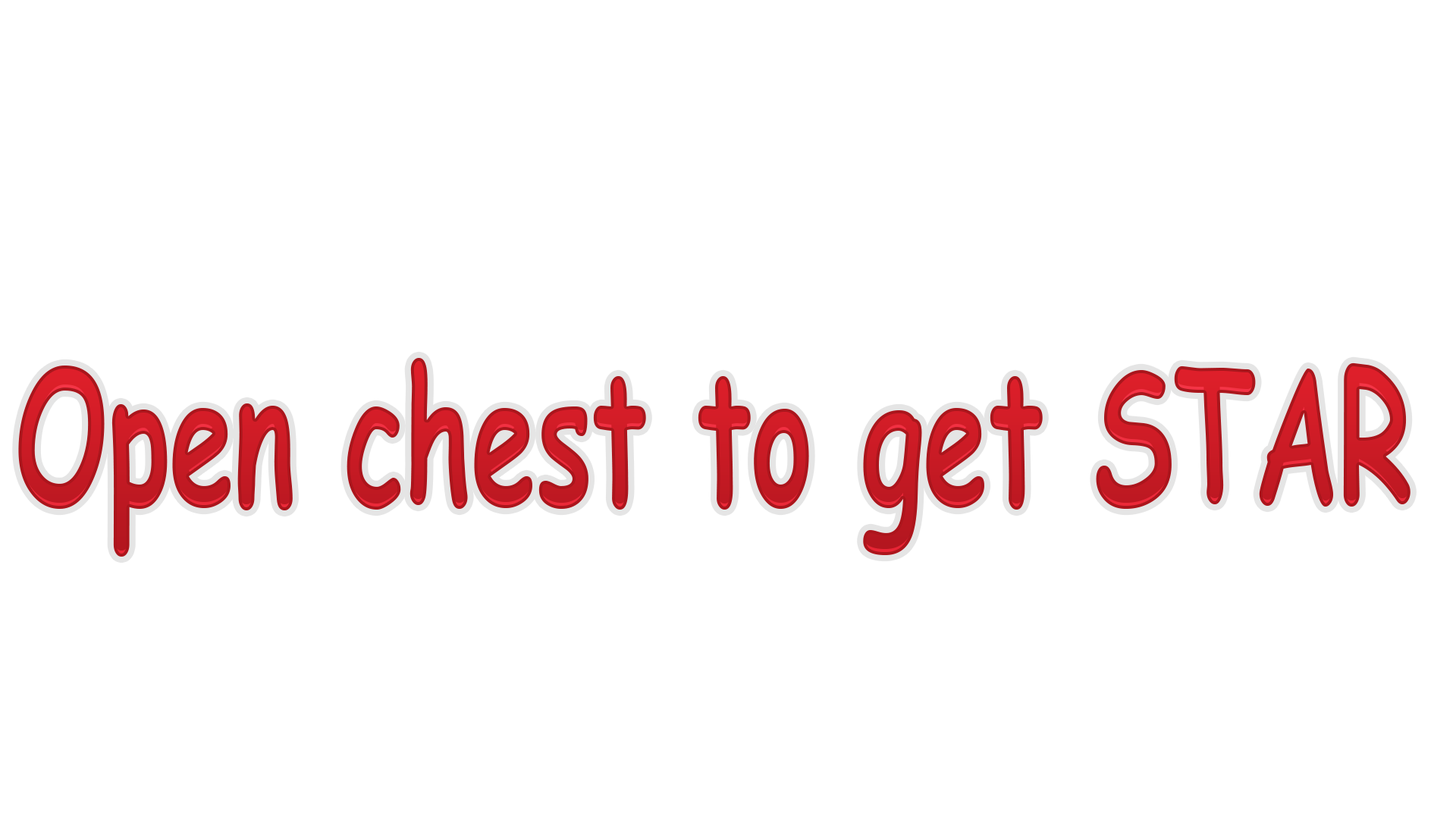
<style>
.page{position:relative;width:1456px;height:819px;background:#ffffff}
.page>*{position:absolute;margin:0}
.t1{font:186.7px "ComicSansMS-Bold";scale:0.62 1}
</style>
<div class="page">
<p class="t1" style="left:18px;top:358px;width:1392px;height:199px">Open chest to get STAR</p>
</div>
